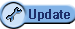
<style>
.page{position:relative;width:75px;height:29px;background:#ffffff}
.page>*{position:absolute;margin:0}
.t1{font:12px "Gulim";letter-spacing:0.025em;color:#1d2f6a}
</style>
<div class="page">
<p class="t1" style="left:29px;top:9px;width:40px;height:12px">Update</p>
<p class="t1" style="left:30px;top:9px;width:40px;height:12px">Update</p>
</div>
